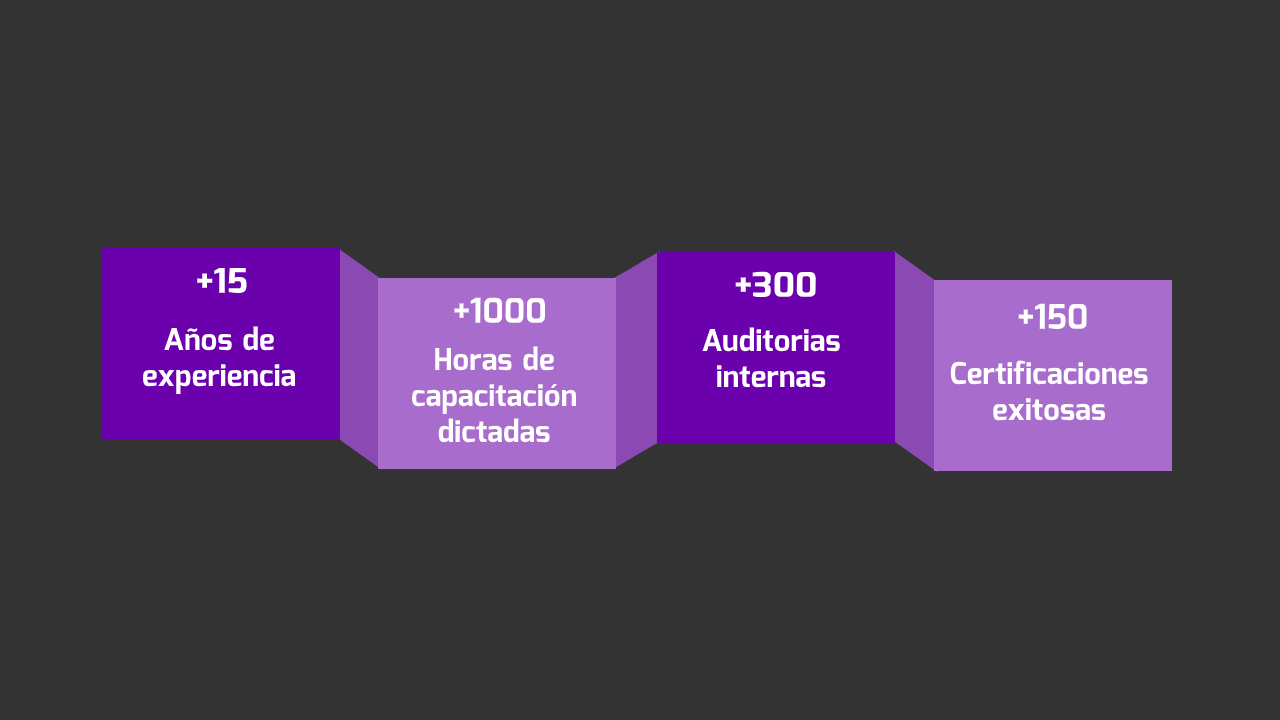
<style>
.page{position:relative;width:1280px;height:720px;background:#333333}
.page>*{position:absolute;margin:0}
.t1{font:34px "Mina-Bold";color:#ffffff;font-weight:bold}
.t2{font:34px "Mina-Bold";color:#ffffff}
.t3{font:30px "Mina-Bold";color:#ffffff}
</style>
<div class="page">
<p class="t1" style="left:197px;top:267px;width:50px;height:26px">+15</p>
<p class="t1" style="left:735px;top:271px;width:81px;height:26px">+300</p>
<p class="t2" style="left:454px;top:297px;width:91px;height:26px">+1000</p>
<p class="t2" style="left:1018px;top:303px;width:69px;height:26px">+150</p>
<p class="t3" style="left:143px;top:326px;width:152px;height:69px;text-align:center">Años de<br>experiencia</p>
<p class="t3" style="left:702px;top:327px;width:138px;height:61px;text-align:center">Auditorias<br>internas</p>
<p class="t3" style="left:412px;top:346px;width:164px;height:97px;text-align:center">Horas de<br>capacitación<br>dictadas</p>
<p class="t3" style="left:950px;top:360px;width:198px;height:61px;text-align:center">Certificaciones<br>exitosas</p>
</div>
